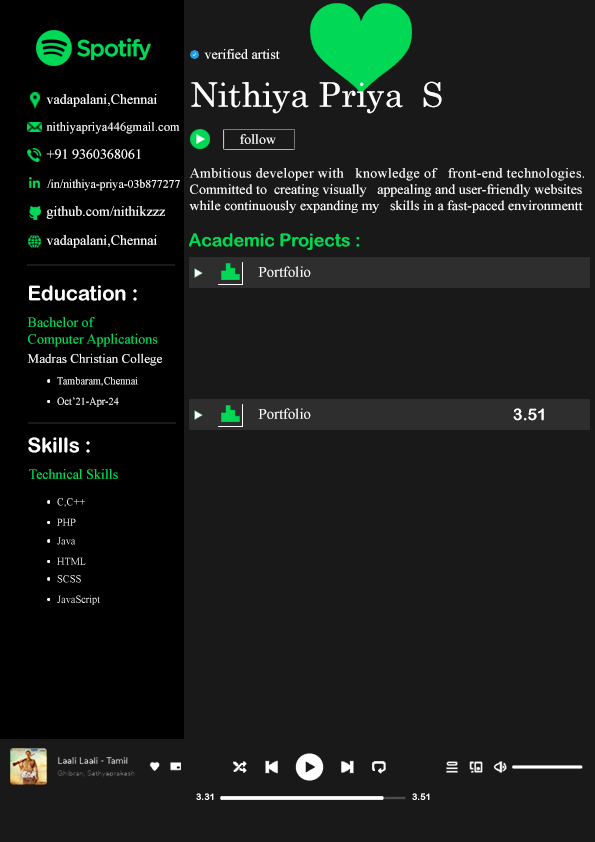
<style>
.page{position:relative;width:595px;height:842px;background:#191919}
.page>*{position:absolute;margin:0}
.t1{font:14px "TimesNewRomanPSMT";color:#ffffff}
.t2{font:33.7px "CenturySchoolbook";color:#ffffff}
.t3{font:12.6px "TimesNewRomanPSMT";color:#ffffff}
.t4{font:13.6px "TimesNewRomanPSMT";color:#ffffff}
.t5{font:13.6px "TimesNewRomanPSMT";letter-spacing:0.025em;color:#ffffff}
.t6{font:11.7px "TimesNewRomanPSMT";color:#ffffff}
.t7{font:17.7px "ArialRoundedMTBold";color:#00d856}
.t8{font:14.7px "TimesNewRomanPSMT";color:#ffffff}
.t9{font:20.2px "ArialRoundedMTBold";color:#ffffff}
.t10{font:14px "TimesNewRomanPSMT";color:#00d856}
.t11{font:13.1px "TimesNewRomanPSMT";color:#ffffff}
.t12{font:10.5px "TimesNewRomanPSMT";color:#ffffff}
.t13{font:16px "ArialRoundedMTBold";color:#ffffff}
.t14{font:9px "ArialRoundedMTBold";color:#ffffff}
</style>
<div class="page">
<p class="t1" style="left:204px;top:49px;width:76px;height:10px">verified artist</p>
<p class="t2" style="left:191px;top:81px;width:251px;height:33px">Nithiya Priya  S</p>
<p class="t1" style="left:46px;top:94px;width:111px;height:13px">vadapalani,Chennai</p>
<p class="t3" style="left:46px;top:122px;width:134px;height:12px">nithiyapriya446gmail.com</p>
<p class="t1" style="left:240px;top:134px;width:36px;height:10px">follow</p>
<p class="t1" style="left:46px;top:149px;width:95px;height:10px">+91 9360368061</p>
<p class="t4" style="left:189px;top:168px;width:395px;height:45px"><span class="t5">Ambitious developer with   knowledge of   front-end technologies. <br></span>Committed to  creating visually   appealing and user-friendly websites <br>while continuously expanding my   skills in a fast-paced environmentt</p>
<p class="t6" style="left:47px;top:179px;width:133px;height:12px">/in/nithiya-priya-03b877277</p>
<p class="t1" style="left:46px;top:206px;width:119px;height:13px">github.com/nithikzzz</p>
<p class="t7" style="left:189px;top:233px;width:171px;height:17px">Academic Projects :</p>
<p class="t1" style="left:46px;top:235px;width:111px;height:13px">vadapalani,Chennai</p>
<p class="t8" style="left:258px;top:266px;width:53px;height:11px">Portfolio</p>
<p class="t9" style="left:29px;top:285px;width:108px;height:16px">Education :</p>
<p class="t10" style="left:27px;top:317px;width:131px;height:30px">Bachelor of <br>Computer Applications</p>
<p class="t11" style="left:27px;top:353px;width:135px;height:13px">Madras Christian College</p>
<p class="t12" style="left:57px;top:377px;width:81px;height:9px">Tambaram,Chennai</p>
<p class="t12" style="left:57px;top:397px;width:62px;height:10px">Oct’21-Apr-24</p>
<p class="t8" style="left:258px;top:408px;width:53px;height:11px">Portfolio</p>
<p class="t13" style="left:513px;top:408px;width:31px;height:13px">3.51</p>
<p class="t9" style="left:28px;top:437px;width:62px;height:16px">Skills :</p>
<p class="t10" style="left:29px;top:469px;width:89px;height:10px">Technical Skills</p>
<p class="t14" style="left:196px;top:793px;width:18px;height:7px">3.31</p>
<p class="t14" style="left:412px;top:793px;width:18px;height:7px">3.51</p>
</div>
